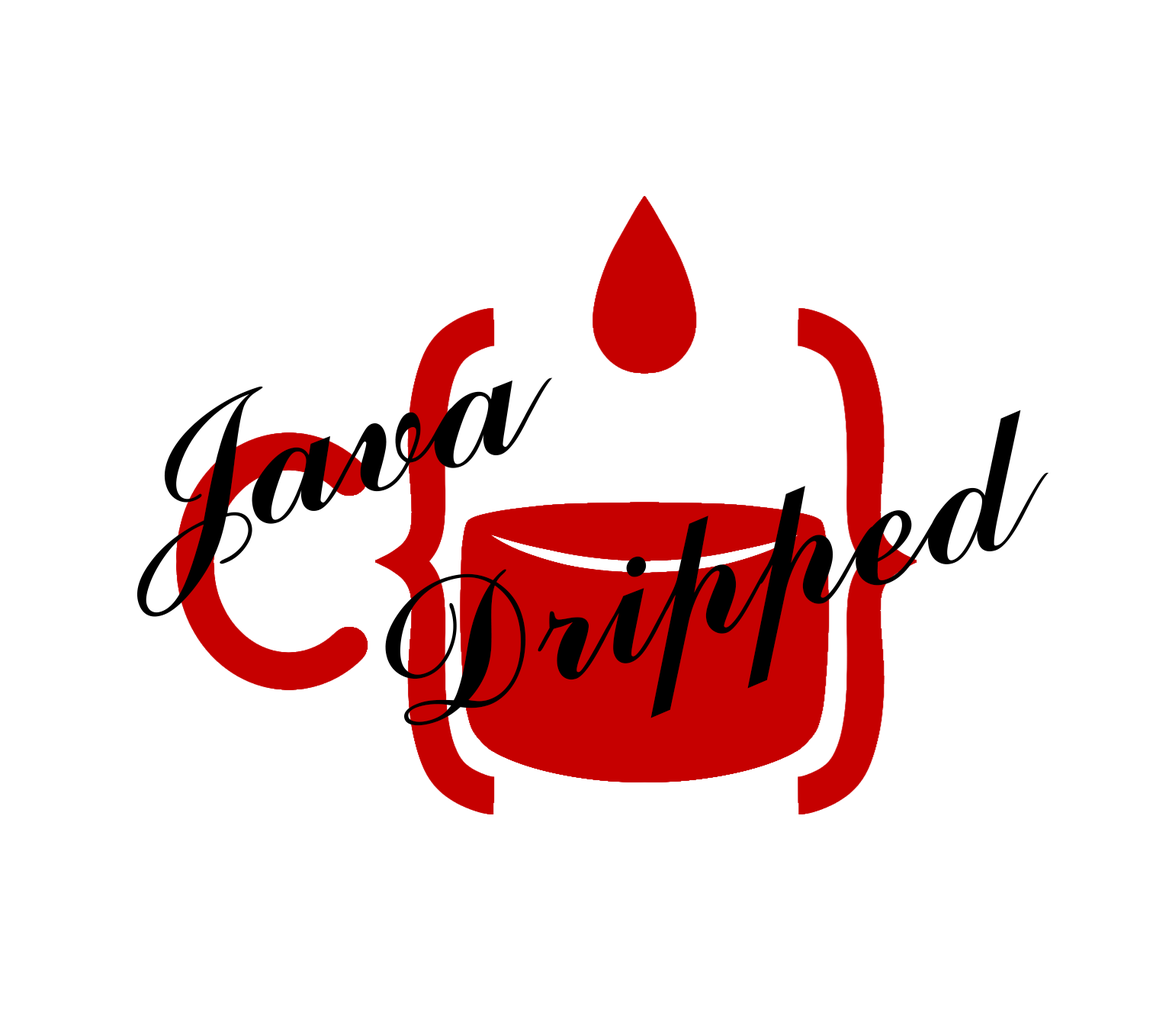
<style>
.page{position:relative;width:1156px;height:1031px;background:#ffffff}
.page>*{position:absolute;margin:0}
.t1{font:213.9px/237.2px "CommercialScriptBT-Regular";color:#000000}
</style>
<div class="page">
<p class="t1" style="left:137px;top:378px;width:912px;height:348px;text-align:right;rotate:-17deg">Java<br>    Dripped</p>
</div>
